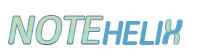
<style>
.page{position:relative;width:200px;height:55px;background:#ffffff}
.page>*{position:absolute;margin:0}
.t1{font:40.8px "Colaborate-Light";letter-spacing:-0.05em;color:#c1dab3;font-weight:bold;font-style:italic}
.t2{font:34px "Colaborate-Light";letter-spacing:-0.05em;color:#5aa4c7;font-style:italic}
.t3{font:37.1px "AmbrosiaDemo";letter-spacing:-0.005em;font-weight:bold;font-style:italic}
</style>
<div class="page">
<p class="t1" style="left:9px;top:16px;width:94px;height:28px">NOTE</p>
<p class="t2" style="left:103px;top:22px;width:60px;height:22px">HELI</p>
<p class="t3" style="left:163px;top:20px;width:19px;height:24px">X</p>
<p class="t3" style="left:163px;top:20px;width:19px;height:24px">X</p>
</div>
